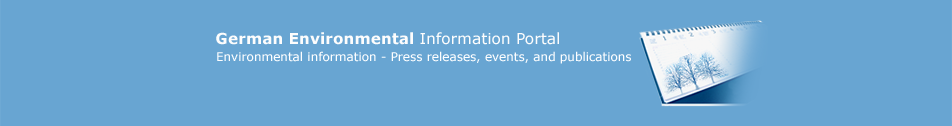
<style>
.page{position:relative;width:952px;height:126px;background:#68a5d2}
.page>*{position:absolute;margin:0}
.t1{font:15.4px "Verdana-Bold";color:#fdfdfd}
.t2{font:15.4px "Verdana";color:#fdfdfd}
.t3{font:12px "Verdana";color:#fdfeff}
</style>
<div class="page">
<p class="t1" style="left:216px;top:32px;width:343px;height:13px">German Environmental <span class="t2">Information Portal</span></p>
<p class="t3" style="left:217px;top:51px;width:414px;height:13px">Environmental information - Press releases, events, and publications</p>
</div>
